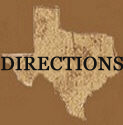
<style>
.page{position:relative;width:123px;height:125px}
.page>*{position:absolute;margin:0}
.t1{font:19.1px "Georgia";color:#121212;font-weight:bold}
</style>
<div class="page">
<p class="t1" style="left:1px;top:56px;width:123px;height:15px">DIRECTIONS</p>
</div>
